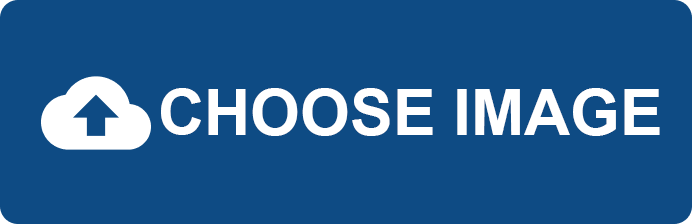
<style>
.page{position:relative;width:692px;height:224px;background:#0e4b84}
.page>*{position:absolute;margin:0}
.t1{font:64px "Arial-BoldMT";color:#ffffff}
</style>
<div class="page">
<p class="t1" style="left:161px;top:88px;width:499px;height:48px">CHOOSE IMAGE</p>
</div>
